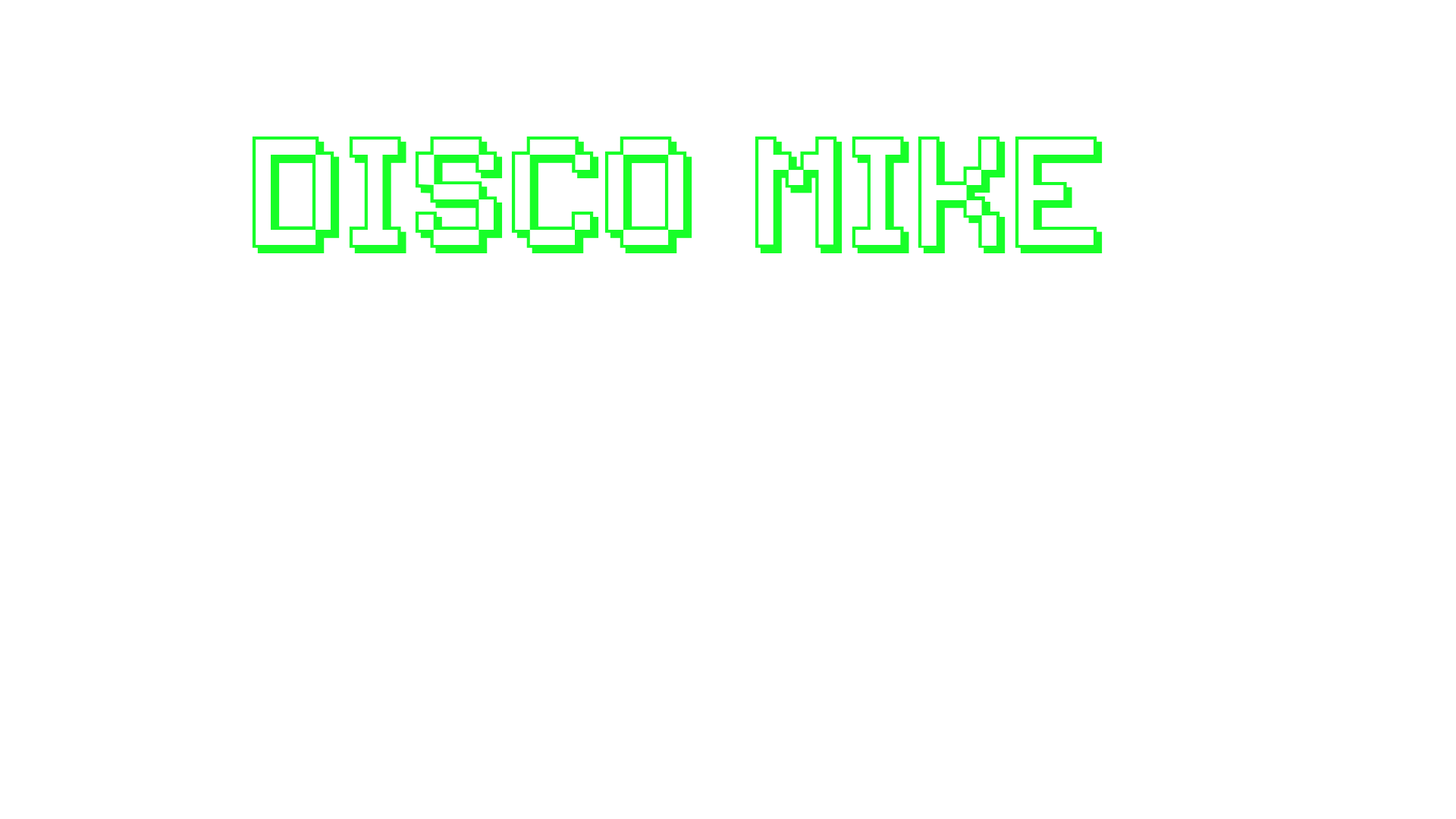
<style>
.page{position:relative;width:1456px;height:819px;background:#ffffff}
.page>*{position:absolute;margin:0}
.t1{font:105.3px "Backto1982";color:#17fe28}
</style>
<div class="page">
<p class="t1" style="left:252px;top:136px;width:851px;height:117px">disco mike</p>
</div>
